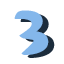
<style>
.page{position:relative;width:64px;height:64px;background:#ffffff}
.page>*{position:absolute;margin:0}
.t1{font:66px "Samba";color:#84b7eb}
.t2{font:66px "Samba"}
</style>
<div class="page">
<p class="t1" style="left:14px;top:10px;width:35px;height:45px">3</p>
<p class="t2" style="left:20px;top:13px;width:35px;height:45px">3</p>
</div>
